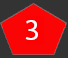
<style>
.page{position:relative;width:68px;height:58px;background:#fa0505}
.page>*{position:absolute;margin:0}
.t1{font:30px "MyriadPro-Regular";color:#ffffff}
</style>
<div class="page">
<p class="t1" style="left:25px;top:20px;width:13px;height:20px">3</p>
</div>
